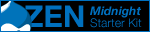
<style>
.page{position:relative;width:150px;height:32px;background:#000000}
.page>*{position:absolute;margin:0}
.t1{font:30px "HelveticaNeue-Bold";color:#0070be}
.t2{font:12px/12px "HelveticaNeue-Light";color:#0070be}
.t3{font:12px/12px "HelveticaNeue-BoldItalic";color:#0070be}
</style>
<div class="page">
<p class="t1" style="left:24px;top:5px;width:60px;height:22px">ZEN</p>
<p class="t2" style="left:90px;top:6px;width:52px;height:22px"><span class="t3">Midnight<br></span>Starter Kit</p>
</div>
